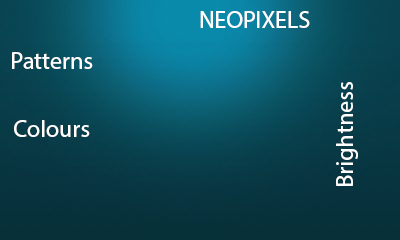
<style>
.page{position:relative;width:400px;height:240px}
.page>*{position:absolute;margin:0}
.t1{font:24px "MyriadHebrew-Regular";color:#ffffff}
.t2{font:24.1px "MyriadHebrew-Regular";color:#ffffff}
</style>
<div class="page">
<p class="t1" style="left:200px;top:11px;width:110px;height:17px">NEOPIXELS</p>
<p class="t1" style="left:12px;top:52px;width:81px;height:17px">Patterns</p>
<p class="t2" style="left:336px;top:82px;width:22px;height:104px;rotate:-90deg">Brightness</p>
<p class="t1" style="left:14px;top:120px;width:76px;height:17px">Colours</p>
</div>
